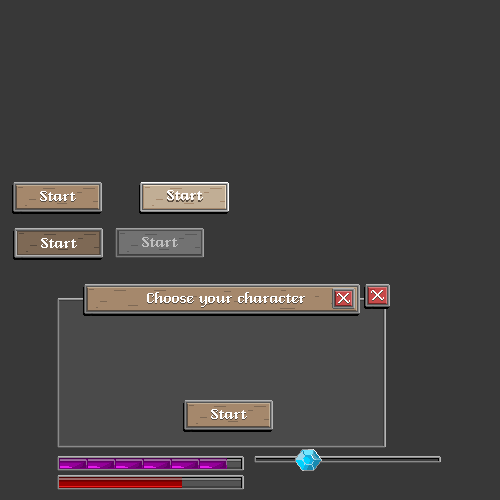
<style>
.page{position:relative;width:500px;height:500px;background:#383838}
.page>*{position:absolute;margin:0}
.t1{font:19px "VeniceClassic";color:#ffffff}
.t2{font:19px "VeniceClassic";color:#bfbfbf}
</style>
<div class="page">
<p class="t1" style="left:40px;top:191px;width:36px;height:10px">Start</p>
<p class="t1" style="left:167px;top:190px;width:36px;height:10px">Start</p>
<p class="t1" style="left:41px;top:238px;width:36px;height:10px">Start</p>
<p class="t2" style="left:142px;top:237px;width:36px;height:10px">Start</p>
<p class="t1" style="left:147px;top:292px;width:158px;height:15px">Choose your character</p>
<p class="t1" style="left:337px;top:293px;width:13px;height:10px">X</p>
<p class="t1" style="left:371px;top:290px;width:13px;height:10px">X</p>
<p class="t1" style="left:211px;top:409px;width:36px;height:10px">Start</p>
</div>
